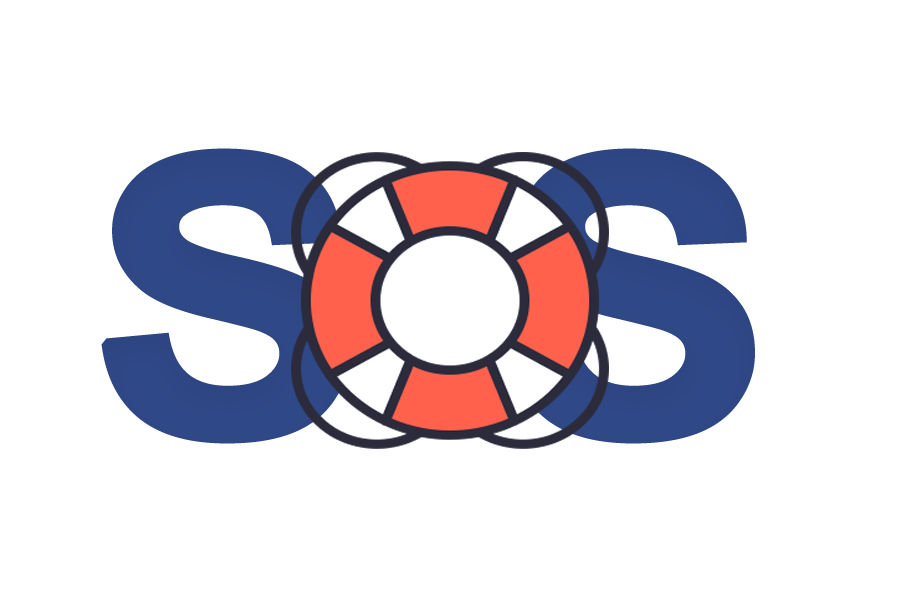
<style>
.page{position:relative;width:900px;height:600px;background:#ffffff}
.page>*{position:absolute;margin:0}
.t1{font:383.5px "Arial-BoldMT";color:#2f4887;font-weight:bold;scale:1.06 1}
</style>
<div class="page">
<p class="t1" style="left:101px;top:148px;width:654px;height:296px">S S</p>
</div>
